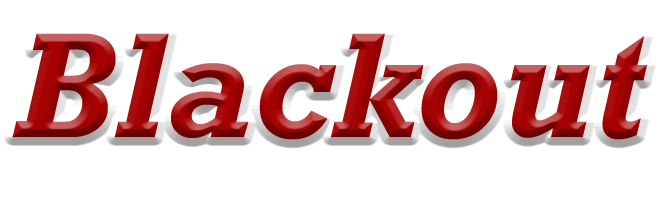
<style>
.page{position:relative;width:670px;height:200px;background:#ffffff}
.page>*{position:absolute;margin:0}
.t1{font:152px "Rockwell-BoldItalic"}
</style>
<div class="page">
<p class="t1" style="left:12px;top:33px;width:635px;height:107px">Blackout</p>
</div>
